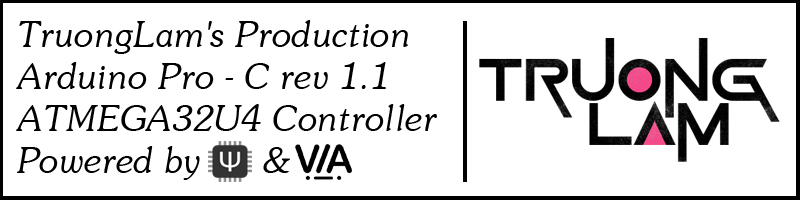
<style>
.page{position:relative;width:800px;height:200px;background:#ffffff}
.page>*{position:absolute;margin:0}
.t1{font:35px "UVNSaigonItalic";color:#000000}
</style>
<div class="page">
<p class="t1" style="left:16px;top:20px;width:421px;height:160px">TruongLam's Production<br>Arduino Pro - C rev 1.1<br>ATMEGA32U4 Controller<br>Powered by      &amp;</p>
</div>
